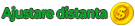
<style>
.page{position:relative;width:135px;height:26px;background:#ffffff}
.page>*{position:absolute;margin:0}
.t1{font:14.3px "Montserrat-Bold";letter-spacing:-0.04em;color:#01af2a;scale:0.88 1}
</style>
<div class="page">
<p class="t1" style="left:2px;top:6px;width:105px;height:15px">Ajustare distanta</p>
</div>
